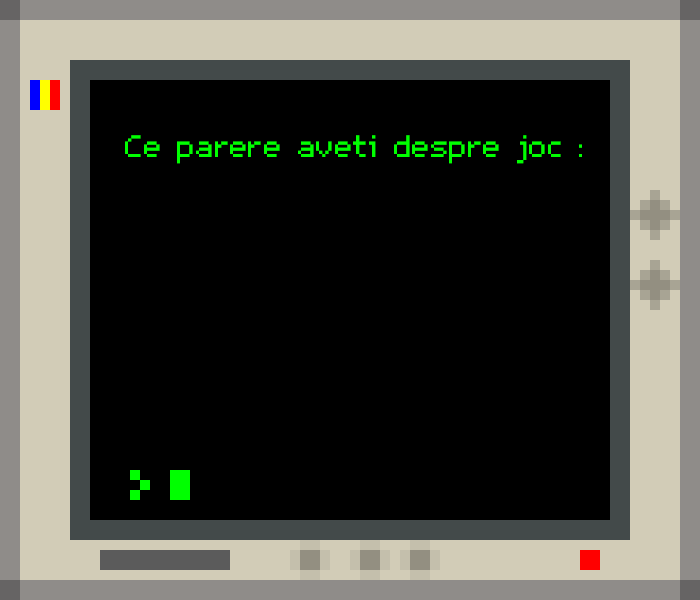
<style>
.page{position:relative;width:700px;height:600px;background:#000000}
.page>*{position:absolute;margin:0}
.t1{font:49.4px "m5x7";color:#00ff00}
</style>
<div class="page">
<p class="t1" style="left:125px;top:135px;width:457px;height:29px">Ce parere aveti despre joc :</p>
</div>
